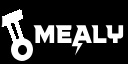
<style>
.page{position:relative;width:128px;height:64px;background:#000000}
.page>*{position:absolute;margin:0}
.t1{font:26.7px "SuperchargeStraight";color:#ffffff;scale:0.83 1}
</style>
<div class="page">
<p class="t1" style="left:33px;top:25px;width:91px;height:31px">MEALY</p>
</div>
